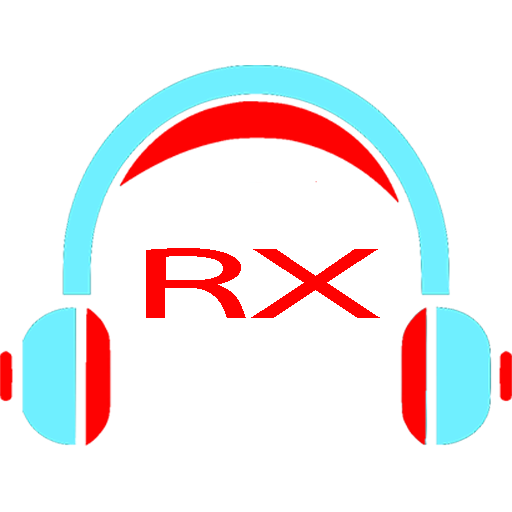
<style>
.page{position:relative;width:512px;height:512px;background:#ffffff}
.page>*{position:absolute;margin:0}
.t1{font:145.3px "THSarabunPSK-Bold";color:#fe0202;scale:2.07 1}
</style>
<div class="page">
<p class="t1" style="left:146px;top:248px;width:234px;height:70px">RX</p>
</div>
